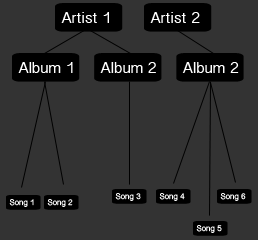
<style>
.page{position:relative;width:258px;height:240px;background:#333333}
.page>*{position:absolute;margin:0}
.t1{font:16px "MalayalamSangamMN";color:#ffffff}
.t2{font:8.2px "MalayalamSangamMN";color:#ffffff}
</style>
<div class="page">
<p class="t1" style="left:61px;top:12px;width:48px;height:11px">Artist 1</p>
<p class="t1" style="left:150px;top:12px;width:50px;height:11px">Artist 2</p>
<p class="t1" style="left:18px;top:62px;width:55px;height:11px">Album 1</p>
<p class="t1" style="left:100px;top:62px;width:56px;height:11px">Album 2</p>
<p class="t1" style="left:182px;top:62px;width:57px;height:11px">Album 2</p>
<p class="t2" style="left:115px;top:193px;width:26px;height:8px">Song 3</p>
<p class="t2" style="left:159px;top:193px;width:26px;height:8px">Song 4</p>
<p class="t2" style="left:220px;top:193px;width:26px;height:8px">Song 6</p>
<p class="t2" style="left:9px;top:199px;width:25px;height:8px">Song 1</p>
<p class="t2" style="left:47px;top:199px;width:26px;height:8px">Song 2</p>
<p class="t2" style="left:196px;top:225px;width:26px;height:8px">Song 5</p>
</div>
